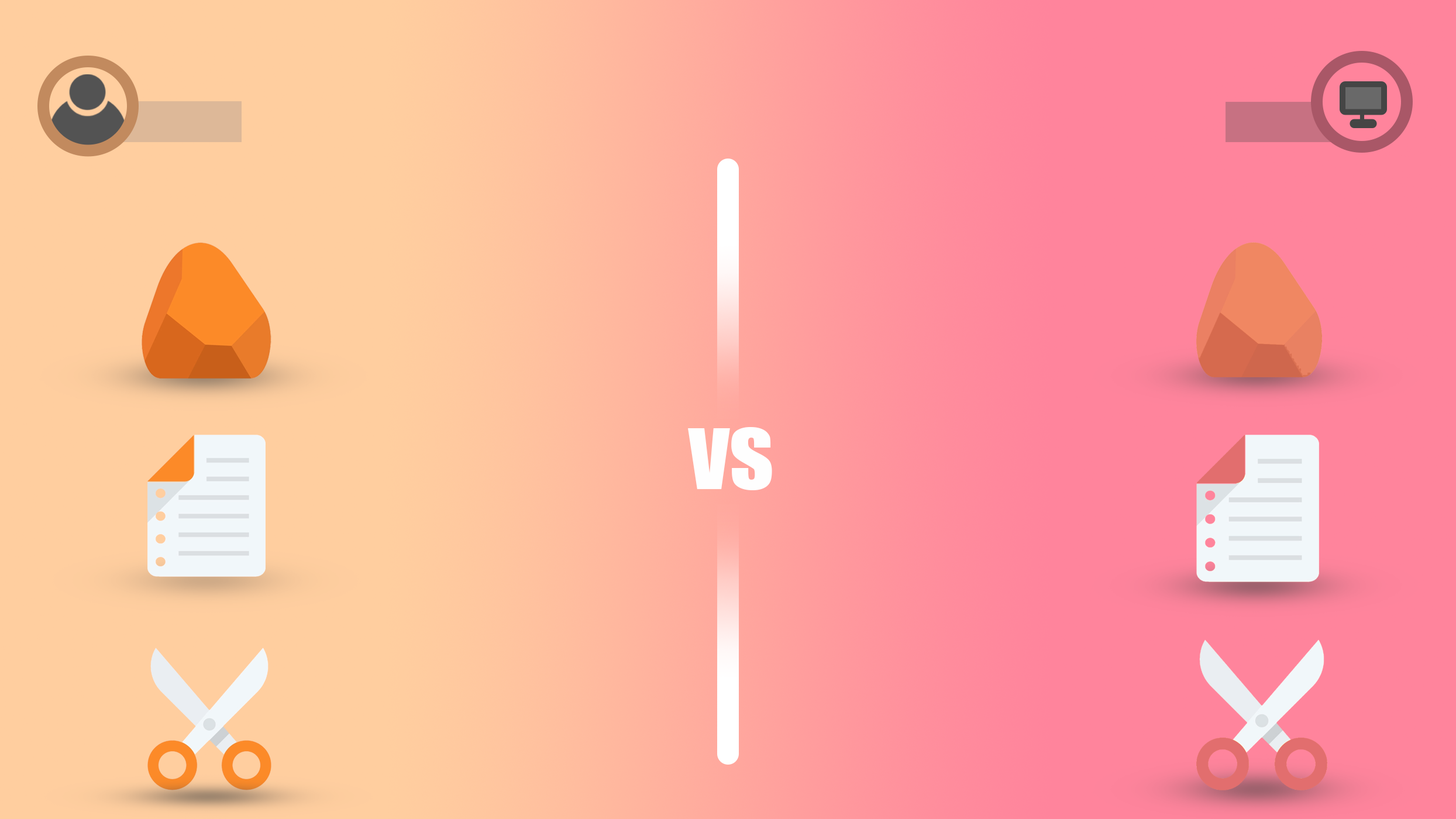
<style>
.page{position:relative;width:1456px;height:819px}
.page>*{position:absolute;margin:0}
.t1{font:93.6px "Impact";color:#fefefe}
</style>
<div class="page">
<p class="t1" style="left:688px;top:427px;width:84px;height:63px">vs</p>
</div>
